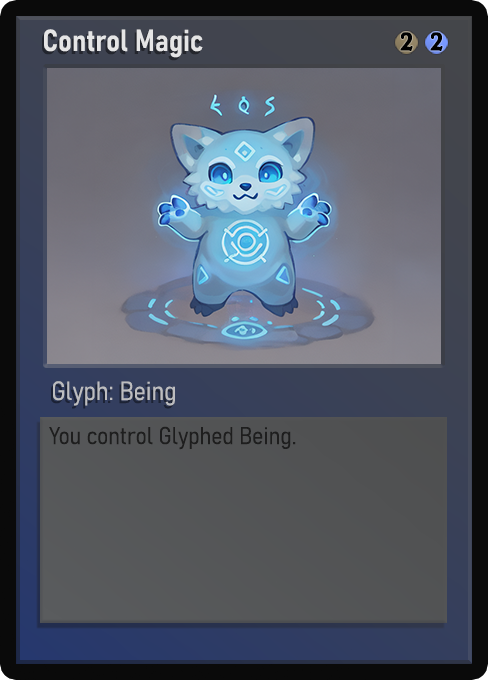
<style>
.page{position:relative;width:488px;height:680px}
.page>*{position:absolute;margin:0}
.t1{font:30px "Bahnschrift-SemiBoldSemiCondensed";color:#f2f2f2;font-weight:bold}
.t2{font:25px "WTRRoycroft";color:#000000;font-weight:bold;scale:1.09 1}
.t3{font:26px "Bahnschrift-LightSemiCondensed";color:#c8c8c8;font-weight:bold}
.t4{font:24px "Bahnschrift-LightSemiCondensed";color:#1e1e1e;font-weight:bold}
</style>
<div class="page">
<p class="t1" style="left:44px;top:29px;width:159px;height:29px;opacity:0.9">Control Magic</p>
<p class="t2" style="left:400px;top:32px;width:13px;height:19px">2</p>
<p class="t2" style="left:430px;top:32px;width:13px;height:19px">2</p>
<p class="t3" style="left:53px;top:381px;width:122px;height:25px;opacity:0.9">Glyph: Being</p>
<p class="t4" style="left:49px;top:426px;width:247px;height:24px">You control Glyphed Being.</p>
</div>
